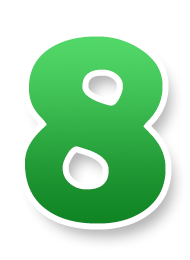
<style>
.page{position:relative;width:190px;height:260px;background:#ffffff}
.page>*{position:absolute;margin:0}
.t1{font:300px "BerlinSansFBDemi-Bold"}
</style>
<div class="page">
<p class="t1" style="left:25px;top:36px;width:141px;height:188px">8</p>
</div>
